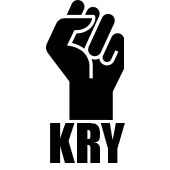
<style>
.page{position:relative;width:170px;height:170px;background:#ffffff}
.page>*{position:absolute;margin:0}
.t1{font:49.5px "Impact";color:#000000}
</style>
<div class="page">
<p class="t1" style="left:50px;top:123px;width:75px;height:40px">KRY</p>
</div>
